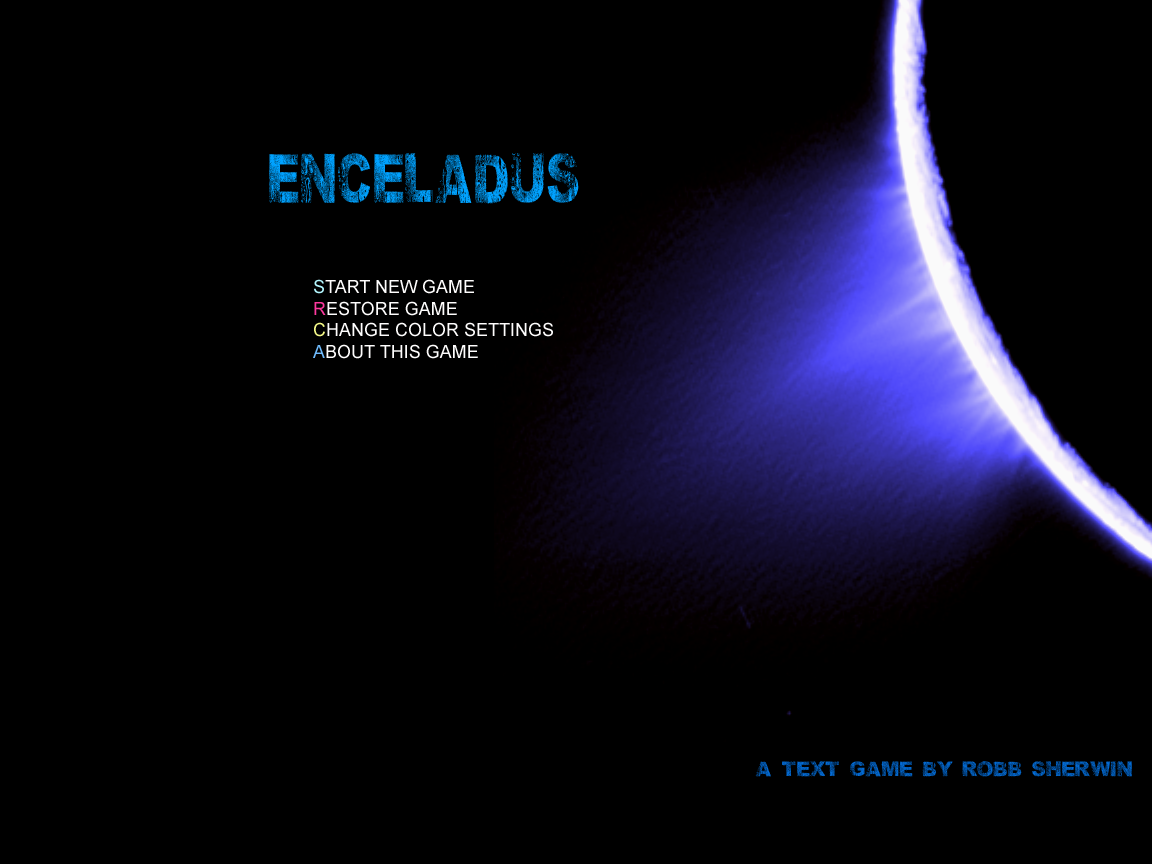
<style>
.page{position:relative;width:1152px;height:864px;background:#000000}
.page>*{position:absolute;margin:0}
.t1{font:60px "WetArial-Black";color:#00a2ff;scale:0.71 1}
.t2{font:18px "ArialMT";color:#fefdfd}
.t3{font:18px "ArialMT";color:#b3f6fe}
.t4{font:18px "ArialMT";color:#fe399f}
.t5{font:18px "ArialMT";color:#f6fa89}
.t6{font:18px "ArialMT";color:#6fbbfc}
.t7{font:18px "WetArial-Black";color:#036bd5}
</style>
<div class="page">
<p class="t1" style="left:269px;top:152px;width:310px;height:52px">ENCELADUS</p>
<p class="t2" style="left:313px;top:279px;width:240px;height:80px"><span class="t3">S</span>TART NEW GAME<br><span class="t4">R</span>ESTORE GAME<br><span class="t5">C</span>HANGE COLOR SETTINGS<br><span class="t6">A</span>BOUT THIS GAME</p>
<p class="t7" style="left:755px;top:761px;width:377px;height:16px">A TEXT GAME BY ROBB SHERWIN</p>
</div>
